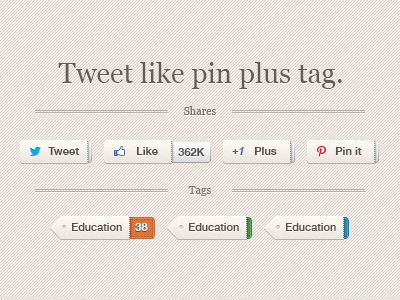
<style>
.page{position:relative;width:400px;height:300px}
.page>*{position:absolute;margin:0}
.t1{font:28px "Georgia";color:#615d59}
.t2{font:11px "Georgia";color:#797774}
.t3{font:11px "HelveticaNeue-Bold";color:#585048}
.t4{font:11px "HelveticaNeue-Bold";color:#565656}
.t5{font:11px "Arial-BoldItalicMT"}
.t6{font:11px "HelveticaNeue-Medium";color:#585048}
.t7{font:11px "HelveticaNeue-Bold";color:#ffffff}
</style>
<div class="page">
<p class="t1" style="left:58px;top:62px;width:284px;height:27px">Tweet like pin plus tag.</p>
<p class="t2" style="left:184px;top:106px;width:32px;height:9px">Shares</p>
<p class="t3" style="left:48px;top:147px;width:32px;height:8px">Tweet</p>
<p class="t3" style="left:136px;top:147px;width:22px;height:8px">Like</p>
<p class="t4" style="left:178px;top:148px;width:27px;height:8px">362K</p>
<p class="t5" style="left:232px;top:147px;width:12px;height:8px">+1</p>
<p class="t3" style="left:254px;top:147px;width:23px;height:8px">Plus</p>
<p class="t3" style="left:335px;top:147px;width:27px;height:8px">Pin it</p>
<p class="t2" style="left:188px;top:186px;width:23px;height:10px">Tags</p>
<p class="t6" style="left:72px;top:223px;width:50px;height:8px">Education</p>
<p class="t7" style="left:135px;top:223px;width:13px;height:8px">38</p>
<p class="t6" style="left:189px;top:223px;width:50px;height:8px">Education</p>
<p class="t6" style="left:286px;top:223px;width:50px;height:8px">Education</p>
</div>
